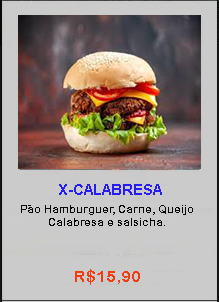
<style>
.page{position:relative;width:219px;height:302px;background:#cbcbcb}
.page>*{position:absolute;margin:0}
.t1{font:14.7px "Arial-BoldMT";color:#261cf4}
.t2{font:10.7px "ArialRoundedMTBold";color:#090909}
.t3{font:16px "ArialRoundedMTBold";color:#f33c12}
</style>
<div class="page">
<p class="t1" style="left:59px;top:184px;width:103px;height:11px">X-CALABRESA</p>
<p class="t2" style="left:21px;top:205px;width:172px;height:21px;text-align:center">Pão Hamburguer, Carne, Queijo<br>Calabresa e salsicha.</p>
<p class="t3" style="left:75px;top:269px;width:65px;height:16px">R$15,90</p>
</div>
